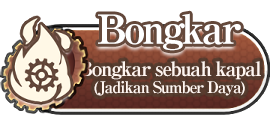
<style>
.page{position:relative;width:270px;height:117px;background:#ffffff}
.page>*{position:absolute;margin:0}
.t1{font:40px "RyuminPro-ExBold";letter-spacing:-0.08em;color:#ffffff}
.t2{font:16px/17px "RyuminPro-ExBold";letter-spacing:-0.08em;color:#fff6f1}
.t3{font:20px/17px "RyuminPro-ExBold";letter-spacing:-0.08em;color:#fff6f1}
</style>
<div class="page">
<p class="t1" style="left:98px;top:13px;width:143px;height:38px">Bongkar</p>
<p class="t2" style="left:78px;top:61px;width:183px;height:35px;text-align:center"><span class="t3">Bongkar sebuah kapal<br></span>(Jadikan Sumber Daya)</p>
</div>
